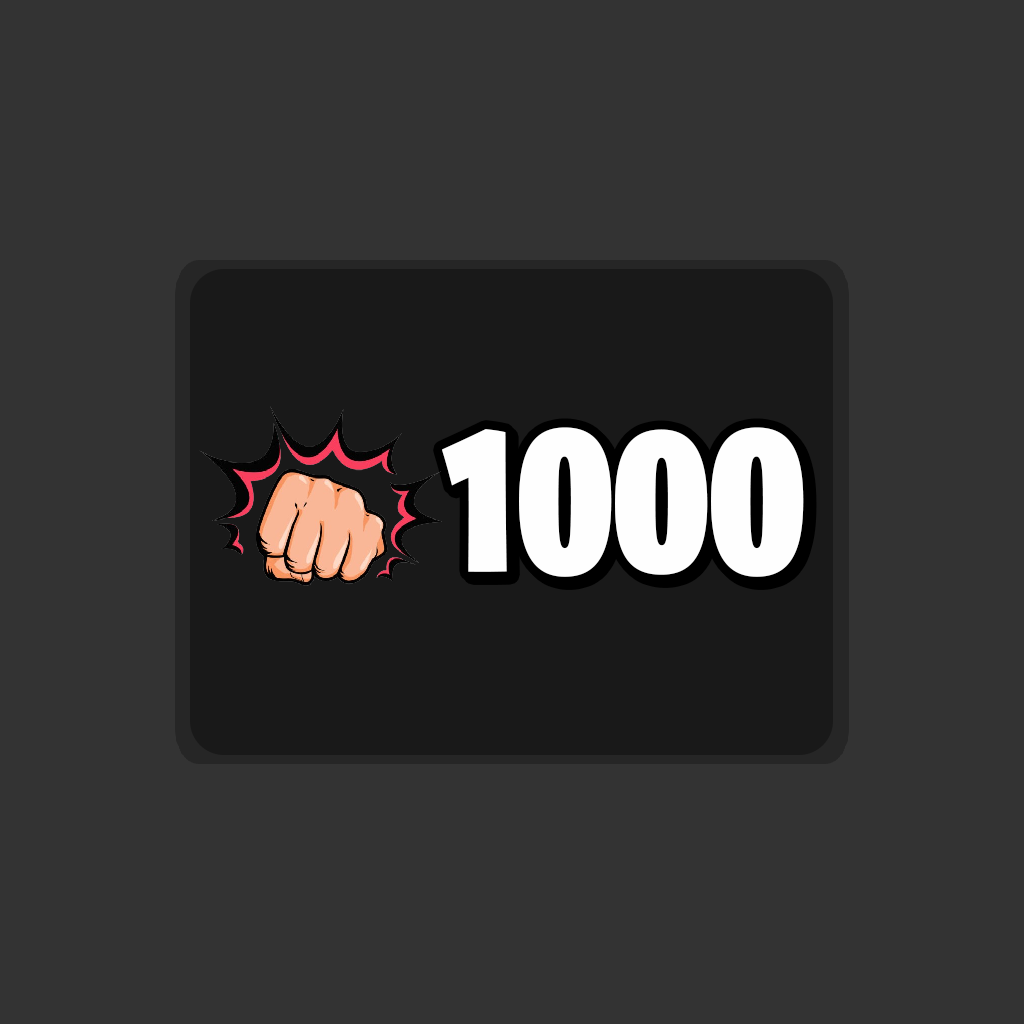
<style>
.page{position:relative;width:1024px;height:1024px;background:#333333}
.page>*{position:absolute;margin:0}
.t1{font:204.4px "BurbankBigCondensed-Black";color:#fefefe}
</style>
<div class="page">
<p class="t1" style="left:442px;top:427px;width:362px;height:150px">1000</p>
</div>
